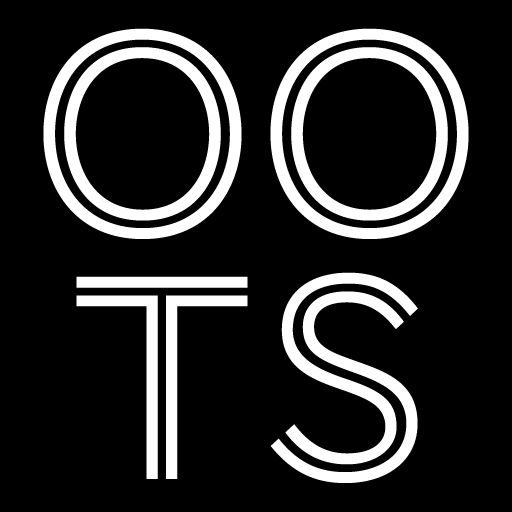
<style>
.page{position:relative;width:512px;height:512px;background:#000000}
.page>*{position:absolute;margin:0}
.t1{font:300px/244px "AWConquerorInline-Regular";letter-spacing:0.025em;color:#ffffff}
</style>
<div class="page">
<p class="t1" style="left:43px;top:28px;width:426px;height:455px;text-align:center">OO<br>TS</p>
</div>
